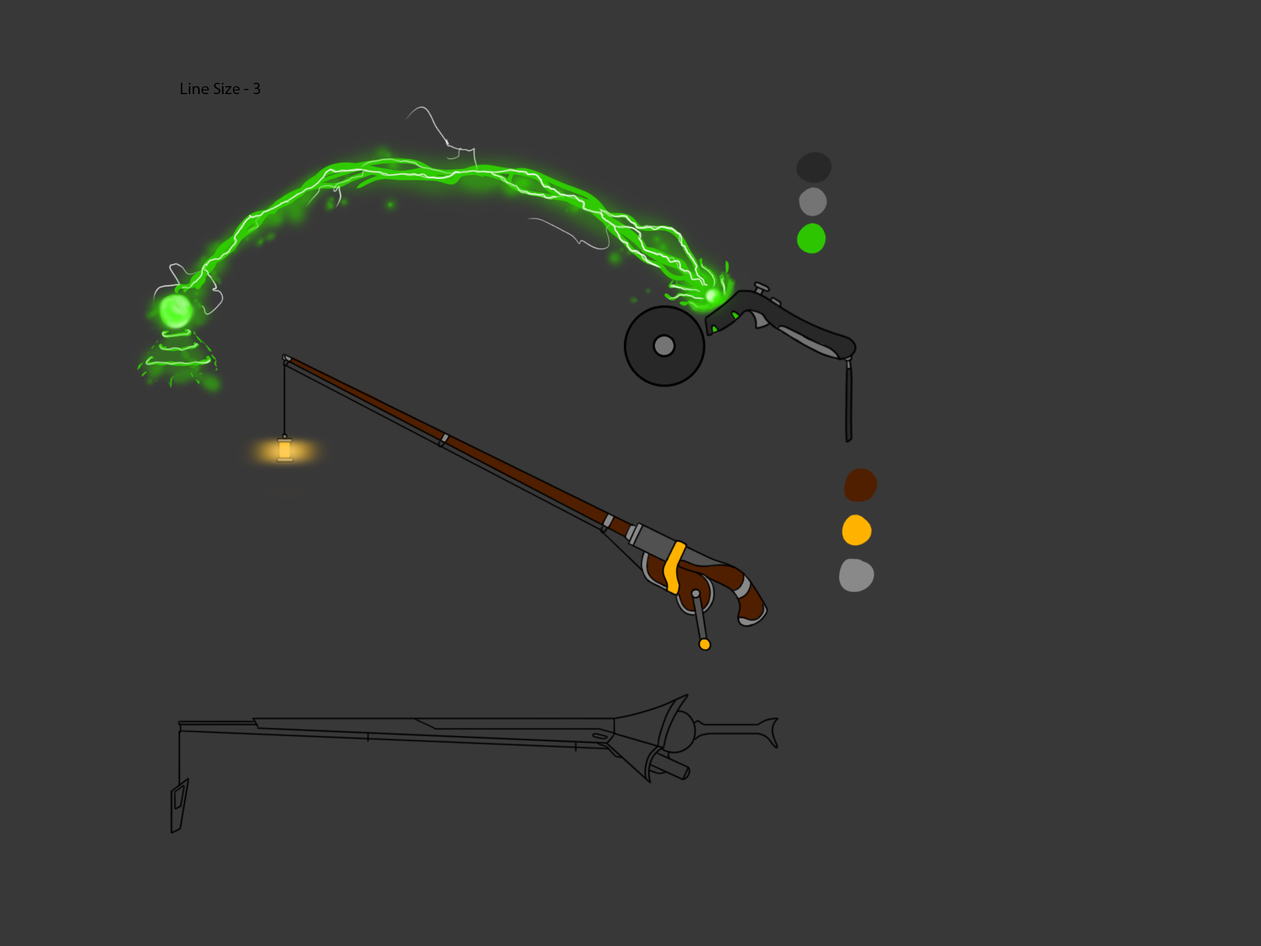
<style>
.page{position:relative;width:1261px;height:946px;background:#383838}
.page>*{position:absolute;margin:0}
.t1{font:16.7px "MyriadPro-Regular";color:#000000}
</style>
<div class="page">
<p class="t1" style="left:181px;top:83px;width:79px;height:11px">Line Size - 3</p>
</div>
